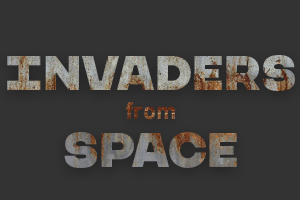
<style>
.page{position:relative;width:300px;height:200px;background:#333333}
.page>*{position:absolute;margin:0}
.t1{font:48px "CHANEY-Regular"}
.t2{font:24px "Bahnschrift-Bold"}
.t3{font:48px/48px "CHANEY-Regular"}
</style>
<div class="page">
<p class="t1" style="left:7px;top:55px;width:288px;height:113px;text-align:center">Invaders<br><span class="t2">from<br></span><span class="t3">Space</span></p>
</div>
